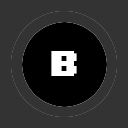
<style>
.page{position:relative;width:128px;height:128px;background:#333333}
.page>*{position:absolute;margin:0}
.t1{font:30px "8BITWONDERNominal";color:#fefefe}
</style>
<div class="page">
<p class="t1" style="left:51px;top:51px;width:26px;height:25px">b</p>
</div>
